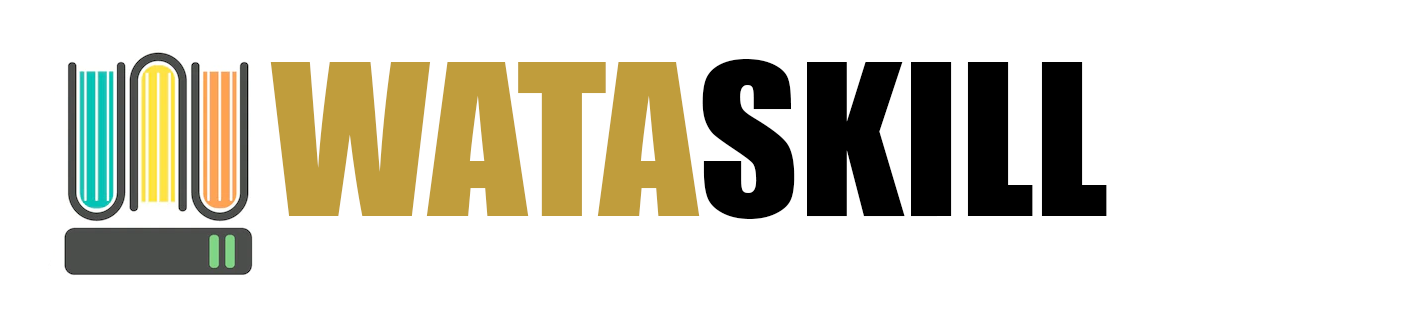
<style>
.page{position:relative;width:1408px;height:317px;background:#ffffff}
.page>*{position:absolute;margin:0}
.t1{font:195.1px "Impact";color:#000000;text-transform:uppercase}
.t2{font:195.1px "Impact";color:#4b4e4b;text-transform:uppercase}
.t3{font:195.1px "Impact";color:#c09d3c;text-transform:uppercase}
</style>
<div class="page">
<p class="t1" style="left:270px;top:59px;width:837px;height:160px"><span class="t2">  </span><span class="t3">WATA</span>SKILL</p>
</div>
